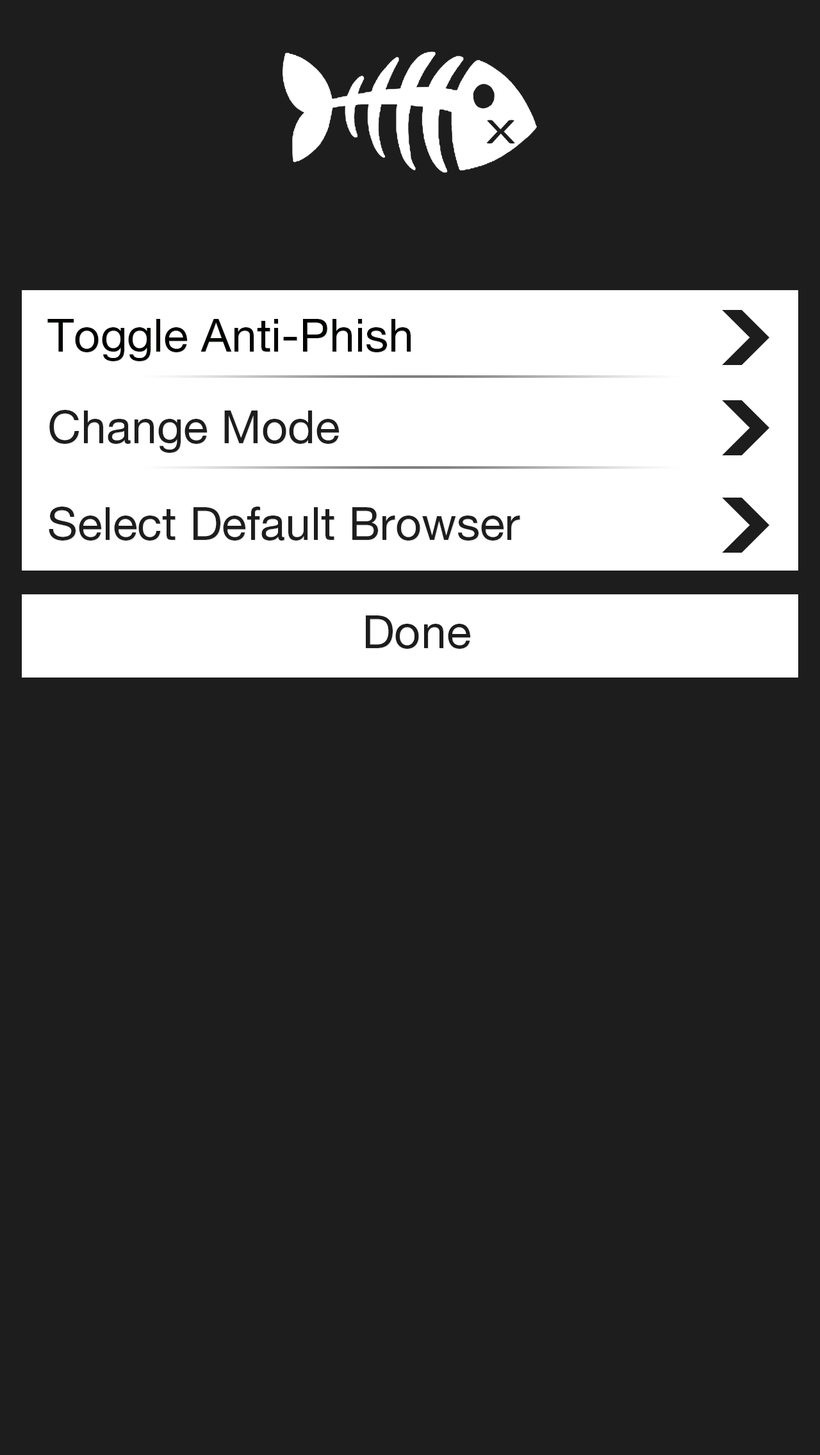
<style>
.page{position:relative;width:820px;height:1455px;background:#1d1d1d}
.page>*{position:absolute;margin:0}
.t1{font:46.1px "HelveticaNeueLTPro-Roman";color:#000300}
.t2{font:46.1px "HelveticaNeueLTPro-Roman";color:#1d1d1d}
.t3{font:46.1px "HelveticaNeueLTPro-Roman";color:#1c1c1c}
</style>
<div class="page">
<p class="t1" style="left:47px;top:319px;width:363px;height:42px">Toggle Anti-Phish</p>
<p class="t2" style="left:49px;top:410px;width:290px;height:43px">Change Mode</p>
<p class="t2" style="left:49px;top:507px;width:471px;height:33px">Select Default Browser</p>
<p class="t3" style="left:366px;top:615px;width:104px;height:34px">Done</p>
</div>
